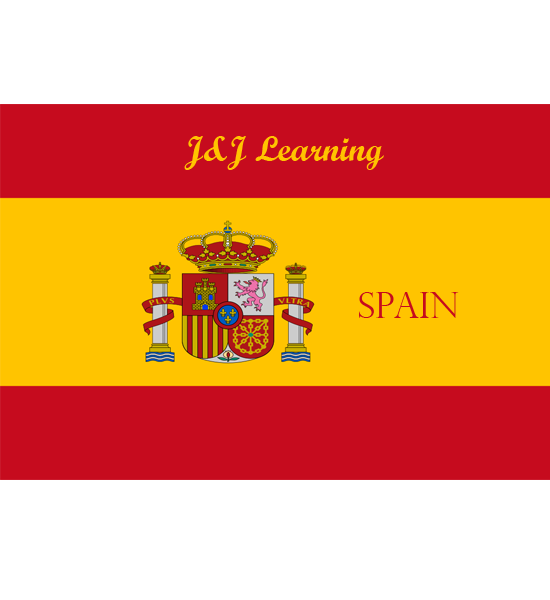
<style>
.page{position:relative;width:550px;height:600px;background:#ffffff}
.page>*{position:absolute;margin:0}
.t1{font:36px "ScriptMTBold";color:#ffc400}
.t2{font:36px "PerpetuaTitlingMT-Light";color:#c60b1e}
</style>
<div class="page">
<p class="t1" style="left:184px;top:136px;width:200px;height:34px">J&amp;J Learning</p>
<p class="t2" style="left:359px;top:292px;width:100px;height:26px">Spain</p>
</div>
